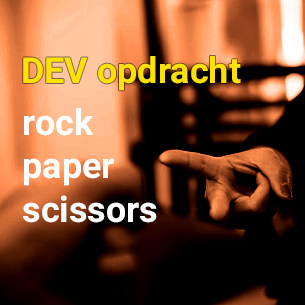
<style>
.page{position:relative;width:305px;height:305px;background:#000000}
.page>*{position:absolute;margin:0}
.t1{font:36px "Roboto-Bold";color:#fde100}
.t2{font:36px "Roboto-Bold";color:#ffffff}
</style>
<div class="page">
<p class="t1" style="left:23px;top:56px;width:218px;height:35px">DEV opdracht</p>
<p class="t2" style="left:23px;top:108px;width:134px;height:115px"><span class="t1"><br></span>rock<br>paper<br>scissors</p>
</div>
